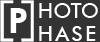
<style>
.page{position:relative;width:100px;height:42px;background:#333333}
.page>*{position:absolute;margin:0}
.t1{font:8.3px "FuturaBT-Medium";color:#ffffff}
.t2{font:13.7px "FuturaBT-Heavy";letter-spacing:0.1em;color:#ffffff}
.t3{font:8.3px "FuturaBT-Medium";letter-spacing:0.1em;color:#ffffff}
</style>
<div class="page">
<p class="t1" style="left:39px;top:3px;width:59px;height:15px">HOTO</p>
<p class="t2" style="left:10px;top:8px;width:17px;height:25px">P</p>
<p class="t3" style="left:39px;top:26px;width:57px;height:15px">HASE</p>
</div>
